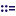
<style>
.page{position:relative;width:16px;height:16px;background:#ffffff}
.page>*{position:absolute;margin:0}
.t1{font:12px "StencilStd";color:#1a0b59}
</style>
<div class="page">
<p class="t1" style="left:1px;top:5px;width:14px;height:7px">::=</p>
</div>
